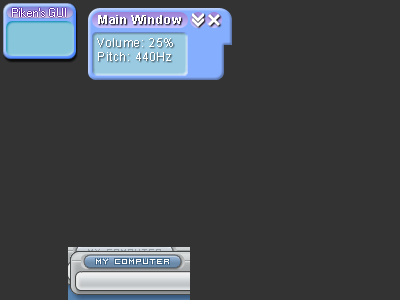
<style>
.page{position:relative;width:400px;height:300px;background:#333333}
.page>*{position:absolute;margin:0}
.t1{font:9px "MS Sans Serif";color:#ffffff}
.t2{font:12px "Arial-BoldMT";letter-spacing:0.05em;color:#ffffff}
.t3{font:12px "ArialMT";letter-spacing:0.05em;color:#ffffff}
</style>
<div class="page">
<p class="t1" style="left:12px;top:8px;width:54px;height:9px">Piken's GUI</p>
<p class="t2" style="left:98px;top:15px;width:83px;height:9px">Main Window</p>
<p class="t3" style="left:97px;top:38px;width:76px;height:23px">Volume: 25%<br>Pitch: 440Hz</p>
</div>
